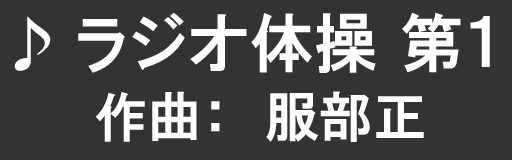
<style>
.page{position:relative;width:512px;height:160px;background:#333333}
.page>*{position:absolute;margin:0}
.t1{font:64px "MS-PGothic";color:#ffffff}
.t2{font:64px "HGPGothicE";color:#ffffff}
.t3{font:54px "HGPGothicE";color:#ffffff}
</style>
<div class="page">
<p class="t1" style="left:14px;top:16px;width:37px;height:55px">♪</p>
<p class="t2" style="left:78px;top:12px;width:412px;height:61px">ラジオ体操 第１</p>
<p class="t3" style="left:95px;top:91px;width:329px;height:51px">作曲：　服部正</p>
</div>
